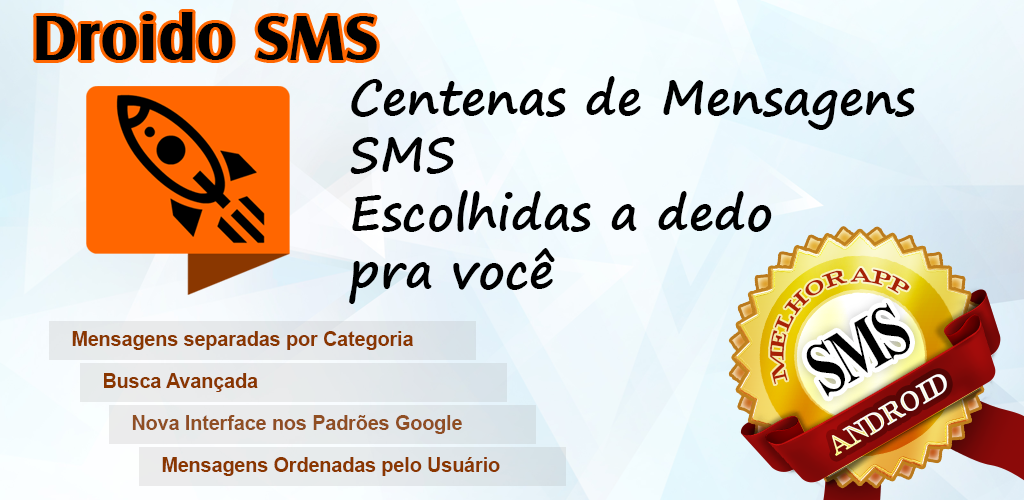
<style>
.page{position:relative;width:1024px;height:500px}
.page>*{position:absolute;margin:0}
.t1{font:66.5px "CastleT-Bold";color:#000000}
.t2{font:48px "SegoePrint-Bold";color:#000000}
.t3{font:19.6px "TimesNewRomanPS-BoldMT";letter-spacing:-0.01em;color:#a72104}
.t4{font:75.4px "TimesNewRomanPS-BoldMT";letter-spacing:-0.07em;color:#000000;scale:0.73 1}
.t5{font:19.7px "Arial-BoldMT";color:#8a3700}
.t6{font:28.5px "TimesNewRomanPS-BoldMT";letter-spacing:-0.01em;color:#ffffff}
.t7{font:19.7px "Arial-BoldMT";color:#904f23}
</style>
<div class="page">
<p class="t1" style="left:36px;top:12px;width:341px;height:48px">Droido SMS</p>
<p class="t2" style="left:349px;top:76px;width:566px;height:228px">Centenas de Mensagens<br>SMS <br>Escolhidas a dedo <br>pra você</p>
<p class="t3" style="left:770px;top:268px;width:140px;height:117px;rotate:-30deg">MELHOR APP</p>
<p class="t4" style="left:806px;top:303px;width:104px;height:94px;rotate:-30deg">SMS</p>
<p class="t5" style="left:72px;top:331px;width:341px;height:19px">Mensagens separadas por Categoria</p>
<p class="t5" style="left:104px;top:373px;width:154px;height:19px">Busca Avançada</p>
<p class="t6" style="left:831px;top:374px;width:116px;height:82px;rotate:-31deg">ANDROID</p>
<p class="t7" style="left:132px;top:415px;width:330px;height:19px">Nova Interface nos Padrões Google</p>
<p class="t5" style="left:162px;top:457px;width:338px;height:19px">Mensagens Ordenadas pelo Usuário</p>
</div>
